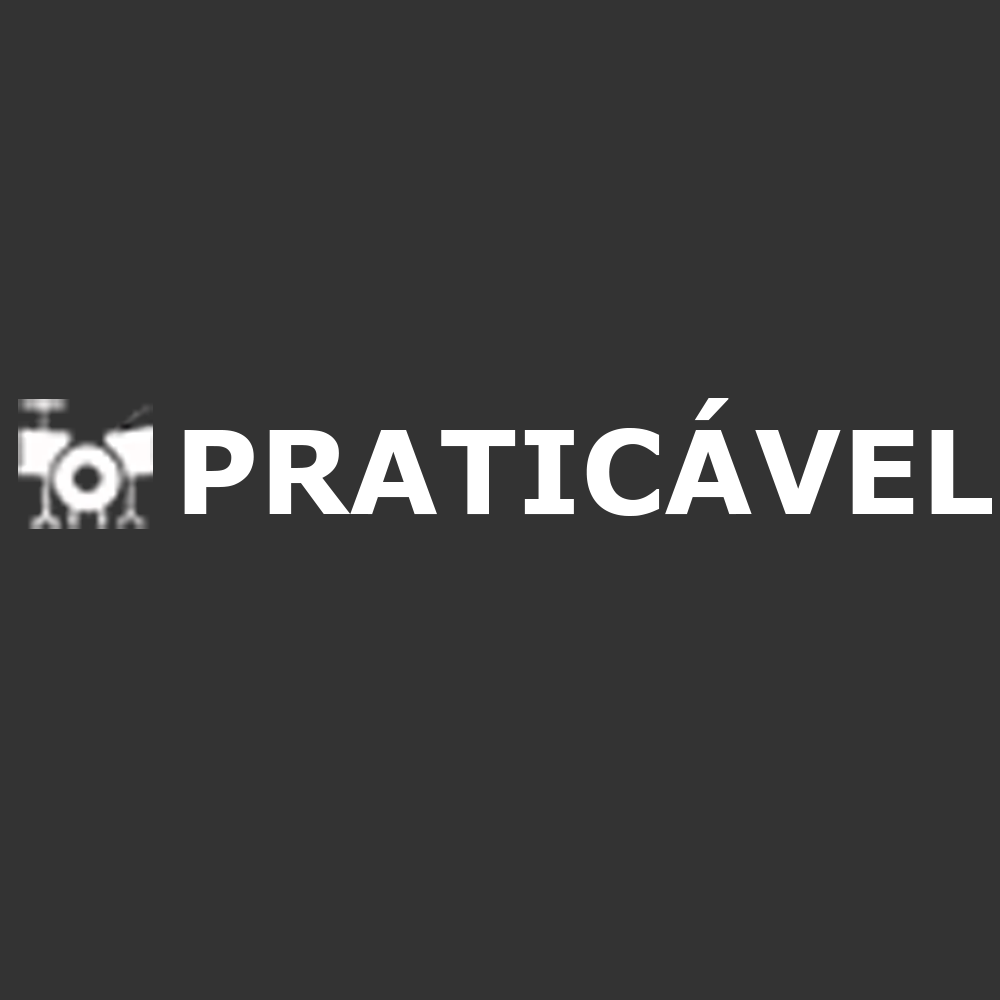
<style>
.page{position:relative;width:1000px;height:1000px;background:#333333}
.page>*{position:absolute;margin:0}
.t1{font:116px "Verdana-Bold";color:#ffffff}
</style>
<div class="page">
<p class="t1" style="left:184px;top:398px;width:808px;height:118px">PRATICÁVEL</p>
</div>
